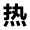
<style>
.page{position:relative;width:30px;height:30px;background:#ffffff}
.page>*{position:absolute;margin:0}
.t1{font:24px "MicrosoftYaHei-Bold";color:#000000}
</style>
<div class="page">
<p class="t1" style="left:3px;top:3px;width:24px;height:24px">热</p>
</div>
